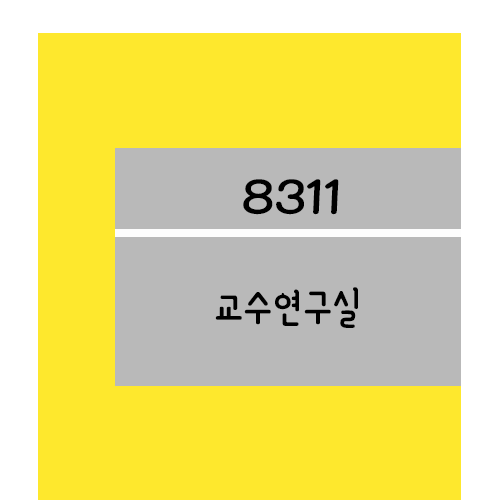
<style>
.page{position:relative;width:500px;height:500px;background:#fee82d}
.page>*{position:absolute;margin:0}
.t1{font:61.2px "YanoljaYacheR";color:#000000;scale:1.18 1}
.t2{font:48px "YanoljaYacheR";color:#000000}
</style>
<div class="page">
<p class="t1" style="left:243px;top:179px;width:96px;height:36px">8311</p>
<p class="t2" style="left:215px;top:287px;width:143px;height:41px">교수연구실</p>
</div>
